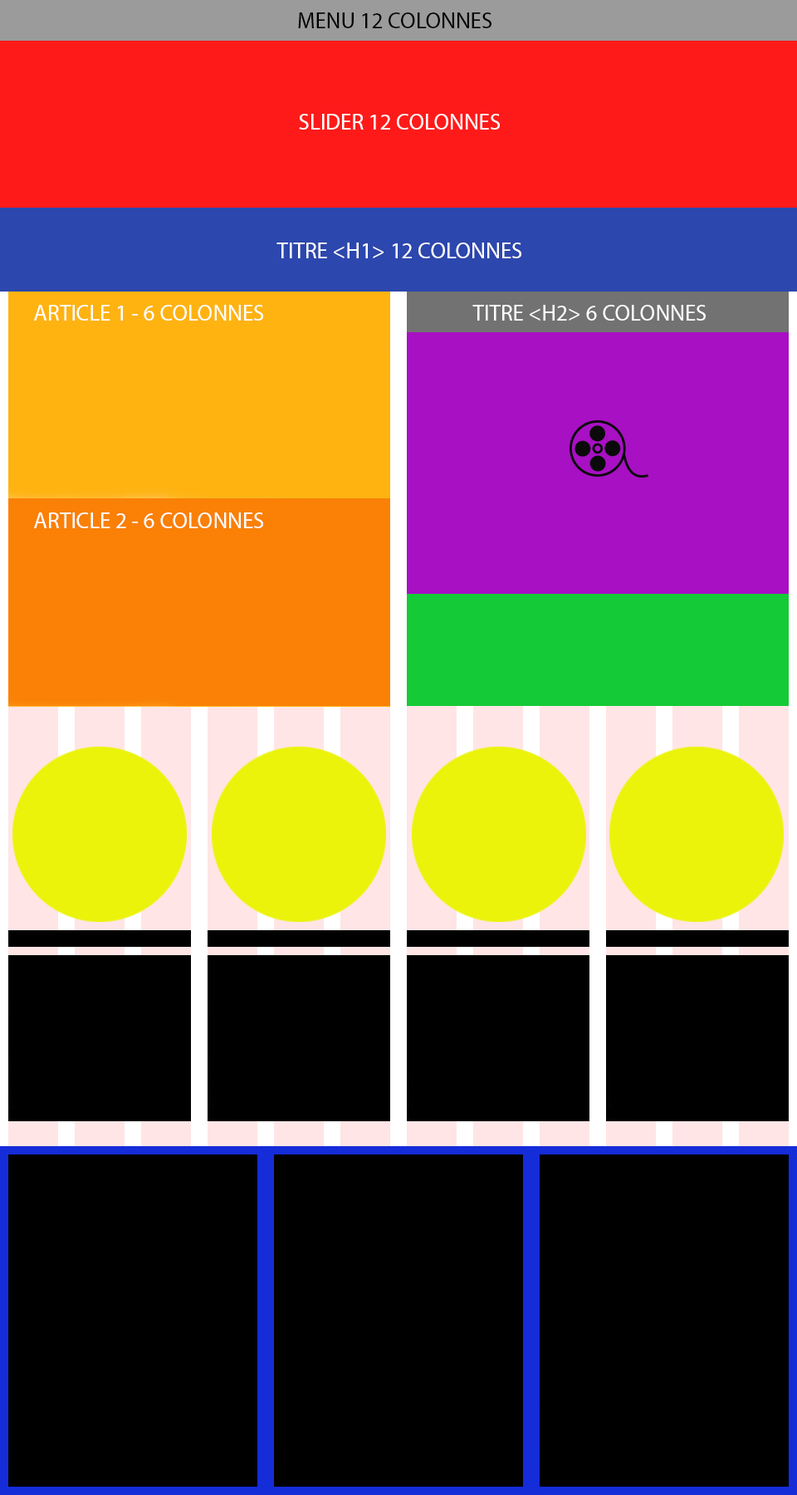
<style>
.page{position:relative;width:797px;height:1495px;background:#000000}
.page>*{position:absolute;margin:0}
.t1{font:22.4px "MyriadPro-Regular";color:#000000}
.t2{font:22.4px "MyriadPro-Regular";color:#ffffff}
</style>
<div class="page">
<p class="t1" style="left:298px;top:12px;width:194px;height:16px">MENU 12 COLONNES</p>
<p class="t2" style="left:299px;top:114px;width:201px;height:16px">SLIDER 12 COLONNES</p>
<p class="t2" style="left:277px;top:243px;width:245px;height:15px">TITRE &lt;H1&gt; 12 COLONNES</p>
<p class="t2" style="left:34px;top:305px;width:229px;height:16px">ARTICLE 1 - 6 COLONNES</p>
<p class="t2" style="left:473px;top:305px;width:233px;height:16px">TITRE &lt;H2&gt; 6 COLONNES</p>
<p class="t2" style="left:34px;top:513px;width:229px;height:15px">ARTICLE 2 - 6 COLONNES</p>
</div>
